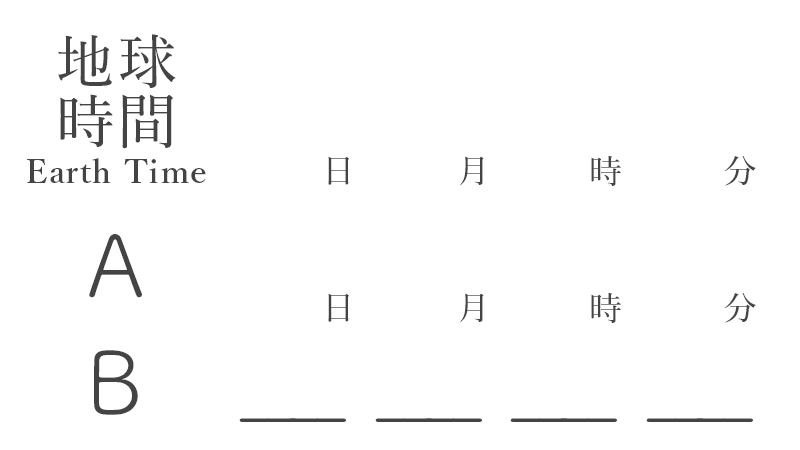
<style>
.page{position:relative;width:800px;height:450px;background:#ffffff}
.page>*{position:absolute;margin:0}
.t1{font:58px/59.7px "YuMin-Medium";letter-spacing:0.06em;color:#444444}
.t2{font:32.9px "YuMin-Demibold";letter-spacing:0.04em;color:#444444}
.t3{font:32.9px "YuMin-Medium";letter-spacing:0.04em;color:#444444}
.t4{font:87.1px "TsukuARdGothic-Regular";letter-spacing:0.06em;color:#444444}
</style>
<div class="page">
<p class="t1" style="left:58px;top:34px;width:118px;height:115px">地球<br>時間</p>
<p class="t2" style="left:27px;top:158px;width:179px;height:25px">Earth Time</p>
<p class="t3" style="left:328px;top:156px;width:21px;height:29px">日</p>
<p class="t3" style="left:460px;top:156px;width:24px;height:30px">月</p>
<p class="t3" style="left:591px;top:156px;width:30px;height:30px">時</p>
<p class="t3" style="left:724px;top:156px;width:32px;height:30px">分</p>
<p class="t4" style="left:89px;top:234px;width:53px;height:64px">A</p>
<p class="t3" style="left:328px;top:293px;width:21px;height:29px">日</p>
<p class="t3" style="left:460px;top:293px;width:24px;height:30px">月</p>
<p class="t3" style="left:591px;top:293px;width:30px;height:30px">時</p>
<p class="t3" style="left:724px;top:293px;width:32px;height:30px">分</p>
<p class="t4" style="left:94px;top:350px;width:44px;height:65px">B</p>
</div>
